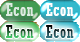
<style>
.page{position:relative;width:80px;height:42px}
.page>*{position:absolute;margin:0}
.t1{font:18px "Rockwell-Condensed";letter-spacing:0.025em;color:#ddece1}
.t2{font:18px "Rockwell-Condensed";letter-spacing:0.025em;color:#ffffff}
.t3{font:18px "Rockwell-Condensed";letter-spacing:0.025em}
</style>
<div class="page">
<p class="t1" style="left:6px;top:3px;width:28px;height:13px">Econ</p>
<p class="t2" style="left:46px;top:3px;width:28px;height:13px">Econ</p>
<p class="t3" style="left:6px;top:25px;width:28px;height:13px">Econ</p>
<p class="t3" style="left:46px;top:25px;width:28px;height:13px">Econ</p>
</div>
